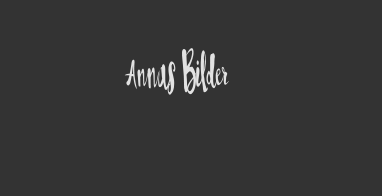
<style>
.page{position:relative;width:382px;height:196px;background:#333333}
.page>*{position:absolute;margin:0}
.t1{font:24px "Pennellino";color:#e2e2e2}
</style>
<div class="page">
<p class="t1" style="left:124px;top:48px;width:105px;height:47px">Annas Bilder</p>
</div>
